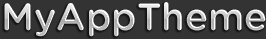
<style>
.page{position:relative;width:266px;height:39px;background:#333333}
.page>*{position:absolute;margin:0}
.t1{font:38px "GothamRounded-Medium"}
</style>
<div class="page">
<p class="t1" style="left:4px;top:2px;width:262px;height:35px">MyAppTheme</p>
</div>
